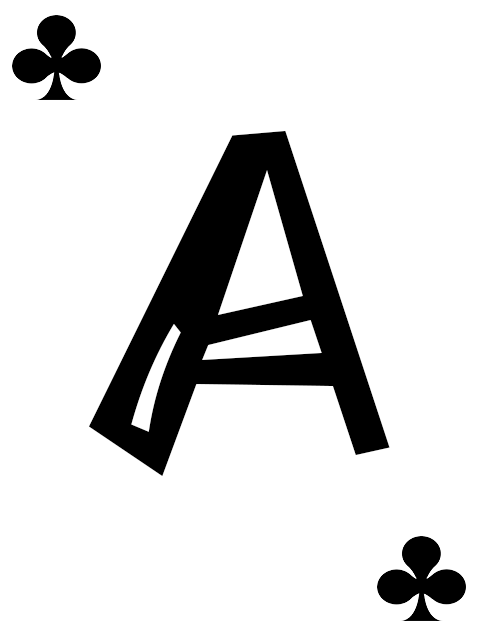
<style>
.page{position:relative;width:480px;height:640px;background:#ffffff}
.page>*{position:absolute;margin:0}
.t1{font:386.3px "Jokerman-Regular";color:#000000}
</style>
<div class="page">
<p class="t1" style="left:88px;top:131px;width:302px;height:345px">A</p>
</div>
